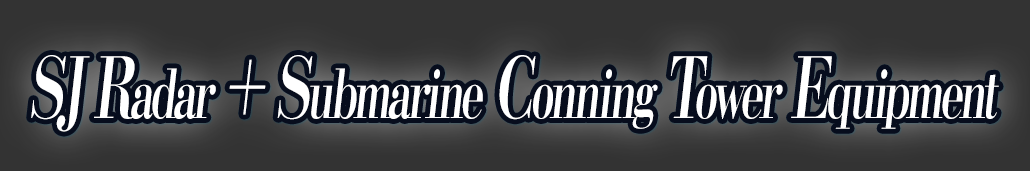
<style>
.page{position:relative;width:1030px;height:171px;background:#333333}
.page>*{position:absolute;margin:0}
.t1{font:67.2px "KochoStd-Heavy";letter-spacing:-0.08em;color:#ffffff;font-style:italic;scale:0.64 1}
.t2{font:84px "KochoStd-Heavy";letter-spacing:-0.08em;color:#ffffff;font-style:italic;scale:0.64 1}
</style>
<div class="page">
<p class="t1" style="left:31px;top:55px;width:968px;height:77px"><span class="t2">SJ R</span>adar<span class="t2"> + S</span>ubmarine<span class="t2"> C</span>onning<span class="t2"> T</span>ower<span class="t2"> E</span>quipment</p>
</div>
